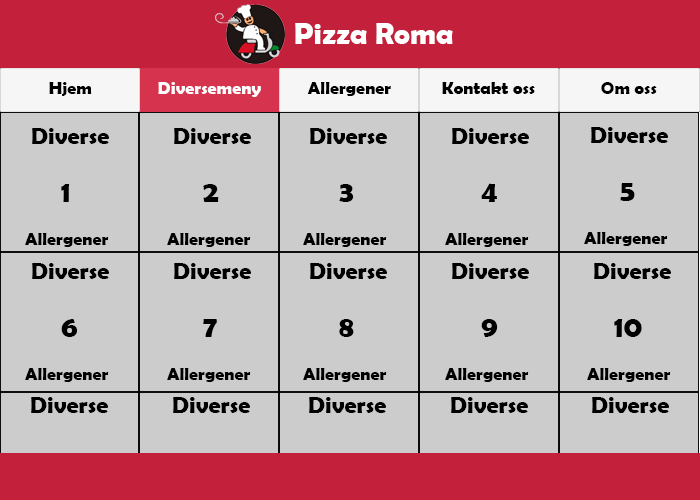
<style>
.page{position:relative;width:700px;height:500px;background:#cccccc}
.page>*{position:absolute;margin:0}
.t1{font:30px "BerlinSansFBDemi-Bold";color:#ffffff}
.t2{font:18px "BerlinSansFBDemi-Bold";color:#000000}
.t3{font:18px "BerlinSansFBDemi-Bold";color:#ffffff}
.t4{font:24px "BerlinSansFBDemi-Bold";color:#000000}
.t5{font:30px "BerlinSansFBDemi-Bold";color:#000000}
</style>
<div class="page">
<p class="t1" style="left:295px;top:23px;width:158px;height:21px">Pizza Roma</p>
<p class="t2" style="left:49px;top:82px;width:43px;height:14px">Hjem</p>
<p class="t3" style="left:158px;top:82px;width:103px;height:15px">Diversemeny</p>
<p class="t2" style="left:307px;top:82px;width:84px;height:14px">Allergener</p>
<p class="t2" style="left:442px;top:82px;width:93px;height:12px">Kontakt oss</p>
<p class="t2" style="left:601px;top:82px;width:56px;height:12px">Om oss</p>
<p class="t2" style="left:25px;top:128px;width:84px;height:119px"><span class="t4">    Diverse<br><br>     </span><span class="t5">1  <br></span><br>    Allergener</p>
<p class="t2" style="left:167px;top:128px;width:84px;height:119px"><span class="t4">    Diverse<br><br>     </span><span class="t5">2  <br></span><br>    Allergener</p>
<p class="t2" style="left:303px;top:128px;width:84px;height:119px"><span class="t4">    Diverse<br><br>     </span><span class="t5">3  <br></span><br>    Allergener</p>
<p class="t2" style="left:445px;top:128px;width:84px;height:119px"><span class="t4">    Diverse<br><br>     </span><span class="t5">4  <br></span><br>    Allergener</p>
<p class="t2" style="left:584px;top:127px;width:84px;height:119px"><span class="t4">    Diverse<br><br>     </span><span class="t5">5  <br></span><br>    Allergener</p>
<p class="t2" style="left:25px;top:263px;width:84px;height:119px"><span class="t4">    Diverse<br><br>     </span><span class="t5">6  <br></span><br>    Allergener</p>
<p class="t2" style="left:167px;top:263px;width:84px;height:119px"><span class="t4">    Diverse<br><br>     </span><span class="t5">7  <br></span><br>    Allergener</p>
<p class="t2" style="left:303px;top:263px;width:84px;height:119px"><span class="t4">    Diverse<br><br>     </span><span class="t5">8  <br></span><br>    Allergener</p>
<p class="t2" style="left:445px;top:263px;width:84px;height:119px"><span class="t4">    Diverse<br><br>     </span><span class="t5">9  <br></span><br>    Allergener</p>
<p class="t2" style="left:587px;top:263px;width:84px;height:119px"><span class="t4">    Diverse<br><br>   </span><span class="t5">10  <br></span><br>    Allergener</p>
</div>
